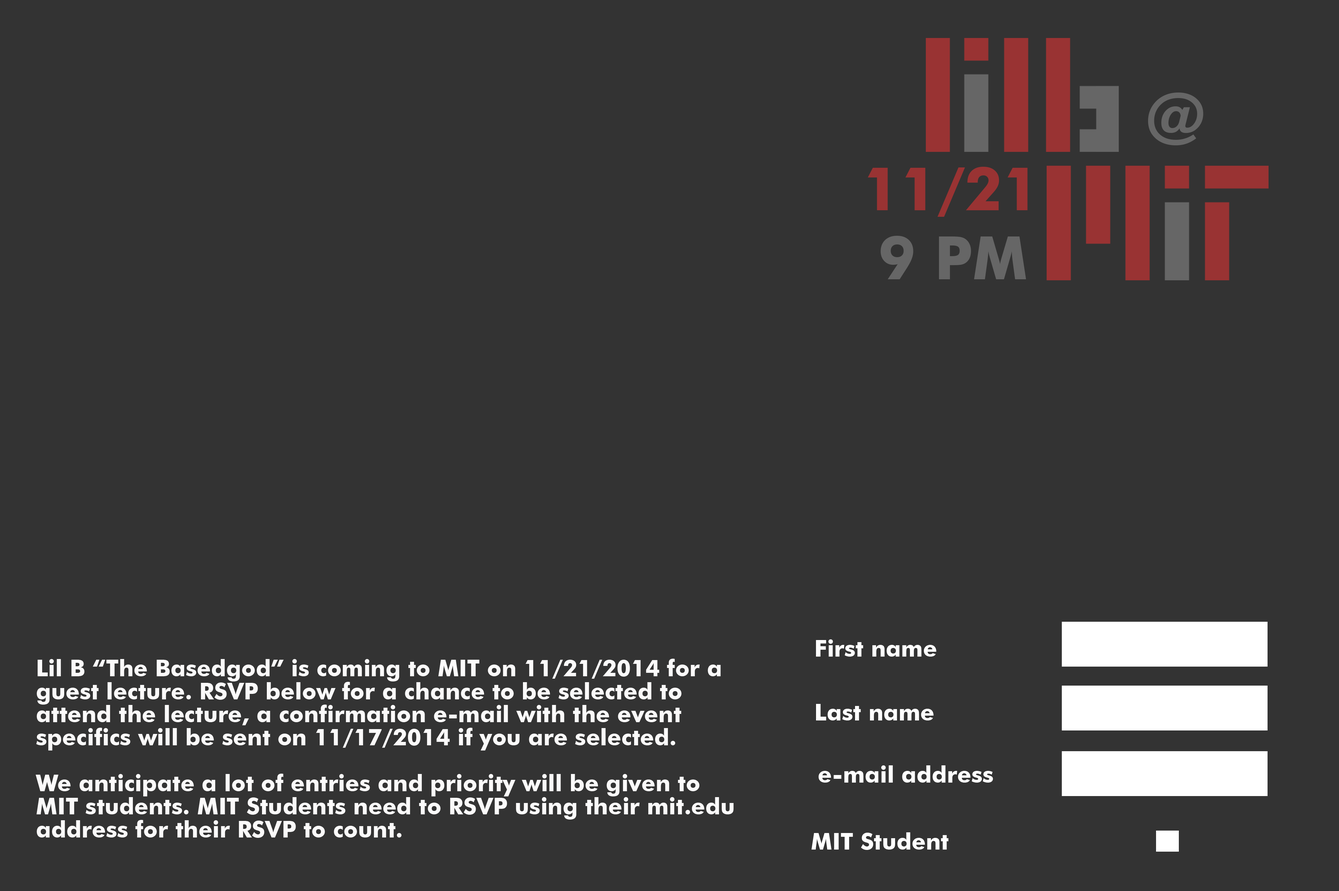
<style>
.page{position:relative;width:1339px;height:891px;background:#333333}
.page>*{position:absolute;margin:0}
.t1{font:59.8px "FuturaBT-Bold";color:#666666}
.t2{font:59.8px "FuturaBT-Bold";color:#993333}
.t3{font:23px "FuturaBT-Bold";color:#ffffff}
.t4{font:23px/23px "FuturaBT-Bold";color:#fbfafa}
</style>
<div class="page">
<p class="t1" style="left:1148px;top:92px;width:55px;height:53px">@</p>
<p class="t2" style="left:868px;top:167px;width:159px;height:50px">11/21</p>
<p class="t1" style="left:880px;top:236px;width:146px;height:43px">9 PM</p>
<p class="t3" style="left:816px;top:639px;width:120px;height:17px">First name</p>
<p class="t4" style="left:36px;top:658px;width:697px;height:180px">Lil B “The Basedgod” is coming to MIT on 11/21/2014 for a guest lecture. RSVP below for a chance to be selected to attend the lecture, a confirmation e-mail with the event specifics will be sent on 11/17/2014 if you are selected. <br><br>We anticipate a lot of entries and priority will be given to MIT students. MIT Students need to RSVP using their mit.edu address for their RSVP to count.</p>
<p class="t3" style="left:816px;top:704px;width:118px;height:16px">Last name</p>
<p class="t3" style="left:818px;top:765px;width:175px;height:17px">e-mail address</p>
<p class="t3" style="left:811px;top:832px;width:137px;height:18px">MIT Student</p>
</div>
